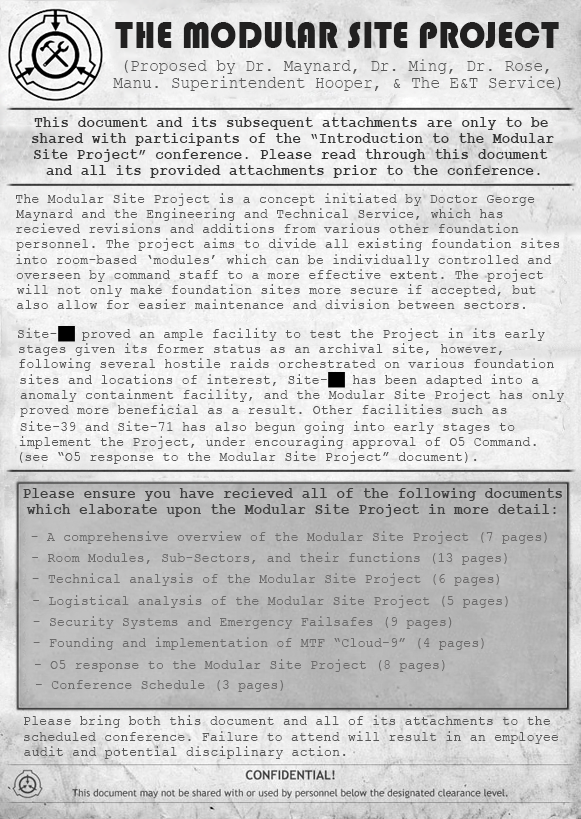
<style>
.page{position:relative;width:581px;height:819px}
.page>*{position:absolute;margin:0}
.t1{font:38.8px "Bauhaus93";letter-spacing:0.01em;color:#212020;scale:0.9 1}
.t2{font:17.5px "CourierNewPSMT";letter-spacing:0.01em;color:#575757;scale:0.9 1}
.t3{font:16.3px "CourierNewPS-BoldMT";letter-spacing:0.01em;color:#343434;scale:0.88 1}
.t4{font:14.8px "CourierNewPSMT";letter-spacing:0.01em;color:#575757;scale:0.9 1}
.t5{font:16.3px "CourierNewPS-BoldMT";letter-spacing:0.01em;color:#3f3f3f;scale:0.88 1}
.t6{font:14.8px "CourierNewPSMT";letter-spacing:0.01em;color:#6b6a6a;scale:0.9 1}
</style>
<div class="page">
<p class="t1" style="left:115px;top:22px;width:444px;height:26px">THE MODULAR SITE PROJECT</p>
<p class="t2" style="left:124px;top:59px;width:425px;height:15px">(Proposed by Dr. Maynard, Dr. Ming, Dr. Rose,</p>
<p class="t2" style="left:113px;top:76px;width:448px;height:15px">Manu. Superintendent Hooper, &amp; The E&amp;T Service)</p>
<p class="t3" style="left:34px;top:117px;width:514px;height:13px">This document and its subsequent attachments are only to be</p>
<p class="t3" style="left:32px;top:133px;width:522px;height:13px">shared with participants of the “Introduction to the Modular</p>
<p class="t3" style="left:33px;top:149px;width:515px;height:13px">Site Project” conference. Please read through this document</p>
<p class="t3" style="left:46px;top:165px;width:494px;height:13px">and all its provided attachments prior to the conference.</p>
<p class="t4" style="left:16px;top:193px;width:519px;height:13px">The Modular Site Project is a concept initiated by Doctor George</p>
<p class="t4" style="left:16px;top:208px;width:487px;height:13px">Maynard and the Engineering and Technical Service, which has</p>
<p class="t4" style="left:16px;top:223px;width:503px;height:10px">recieved revisions and additions from various other foundation</p>
<p class="t4" style="left:16px;top:238px;width:544px;height:13px">personnel. The project aims to divide all existing foundation sites</p>
<p class="t4" style="left:16px;top:254px;width:536px;height:13px">into room-based ‘modules’ which can be individually controlled and</p>
<p class="t4" style="left:16px;top:269px;width:527px;height:13px">overseen by command staff to a more effective extent. The project</p>
<p class="t4" style="left:17px;top:284px;width:519px;height:13px">will not only make foundation sites more secure if accepted, but</p>
<p class="t4" style="left:17px;top:299px;width:508px;height:10px">also allow for easier maintenance and division between sectors.</p>
<p class="t4" style="left:18px;top:328px;width:527px;height:13px">Site-35 proved an ample facility to test the Project in its early</p>
<p class="t4" style="left:19px;top:343px;width:483px;height:13px">stages given its former status as an archival site, however,</p>
<p class="t4" style="left:19px;top:358px;width:535px;height:13px">following several hostile raids orchestrated on various foundation</p>
<p class="t4" style="left:20px;top:374px;width:519px;height:13px">sites and locations of interest, Site-35 has been adapted into a</p>
<p class="t4" style="left:20px;top:389px;width:544px;height:13px">anomaly containment facility, and the Modular Site Project has only</p>
<p class="t4" style="left:20px;top:404px;width:487px;height:13px">proved more beneficial as a result. Other facilities such as</p>
<p class="t4" style="left:20px;top:421px;width:495px;height:13px">Site-39 and Site-71 has also begun going into early stages to</p>
<p class="t4" style="left:19px;top:436px;width:517px;height:13px">implement the Project, under encouraging approval of O5 Command.</p>
<p class="t4" style="left:20px;top:451px;width:457px;height:13px">(see “O5 response to the Modular Site Project” document).</p>
<p class="t5" style="left:23px;top:488px;width:539px;height:13px">Please ensure you have recieved all of the following documents</p>
<p class="t5" style="left:26px;top:504px;width:530px;height:13px">which elaborate upon the Modular Site Project in more detail:</p>
<p class="t6" style="left:31px;top:531px;width:516px;height:13px">- A comprehensive overview of the Modular Site Project (7 pages)</p>
<p class="t6" style="left:32px;top:552px;width:475px;height:13px">- Room Modules, Sub-Sectors, and their functions (13 pages)</p>
<p class="t6" style="left:32px;top:573px;width:467px;height:13px">- Technical analysis of the Modular Site Project (6 pages)</p>
<p class="t6" style="left:33px;top:595px;width:475px;height:13px">- Logistical analysis of the Modular Site Project (5 pages)</p>
<p class="t6" style="left:33px;top:616px;width:419px;height:13px">- Security Systems and Emergency Failsafes (9 pages)</p>
<p class="t6" style="left:33px;top:637px;width:451px;height:13px">- Founding and implementation of MTF “Cloud-9” (4 pages)</p>
<p class="t6" style="left:35px;top:659px;width:410px;height:13px">- O5 response to the Modular Site Project (8 pages)</p>
<p class="t6" style="left:36px;top:680px;width:247px;height:12px">- Conference Schedule (3 pages)</p>
<p class="t4" style="left:24px;top:715px;width:526px;height:13px">Please bring both this document and all of its attachments to the</p>
<p class="t4" style="left:24px;top:731px;width:534px;height:13px">scheduled conference. Failure to attend will result in an employee</p>
<p class="t4" style="left:24px;top:746px;width:322px;height:13px">audit and potential disciplinary action.</p>
</div>
